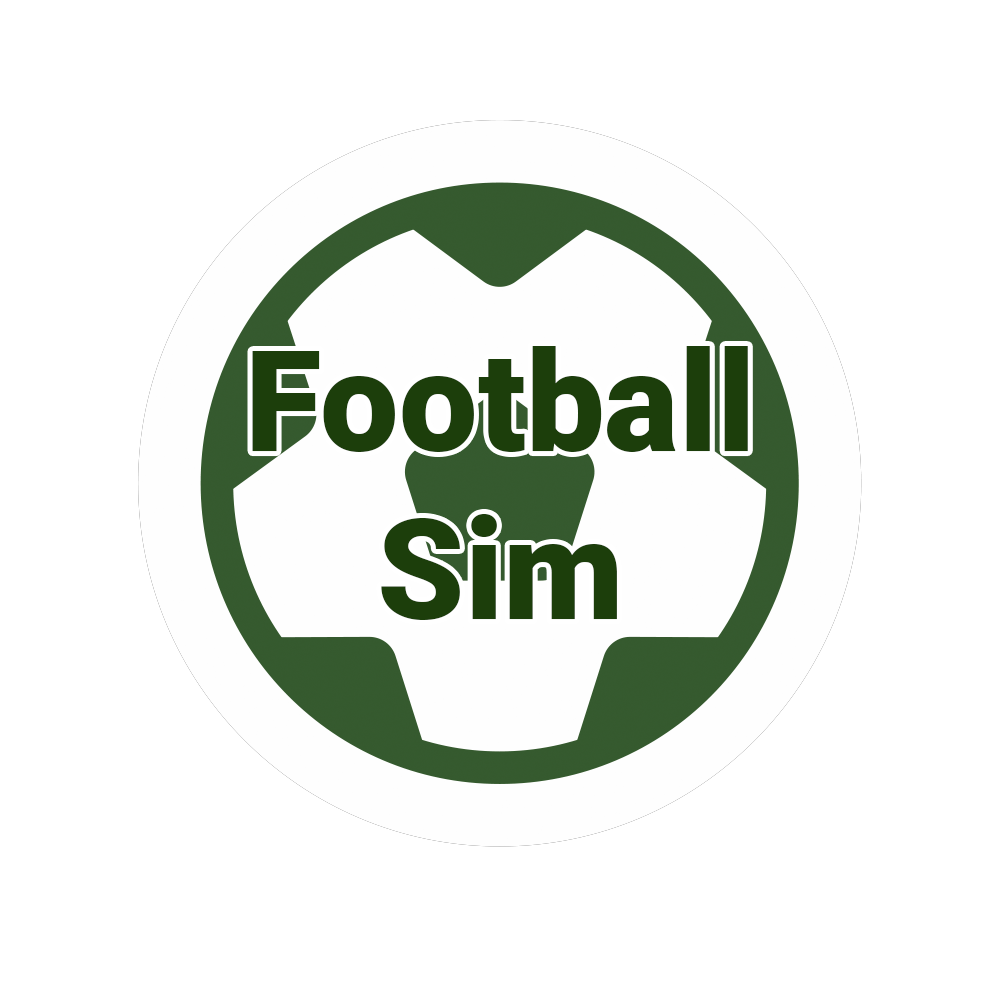
<style>
.page{position:relative;width:1000px;height:1000px;background:#ffffff}
.page>*{position:absolute;margin:0}
.t1{font:140px "Roboto-Black";color:#1c3e0b}
</style>
<div class="page">
<p class="t1" style="left:252px;top:346px;width:496px;height:274px;text-align:center">Football<br>Sim</p>
</div>
